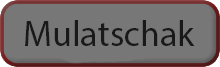
<style>
.page{position:relative;width:220px;height:67px;background:#777777}
.page>*{position:absolute;margin:0}
.t1{font:36px "MyriadPro-Regular";color:#191919}
</style>
<div class="page">
<p class="t1" style="left:25px;top:20px;width:170px;height:26px">Mulatschak</p>
</div>
